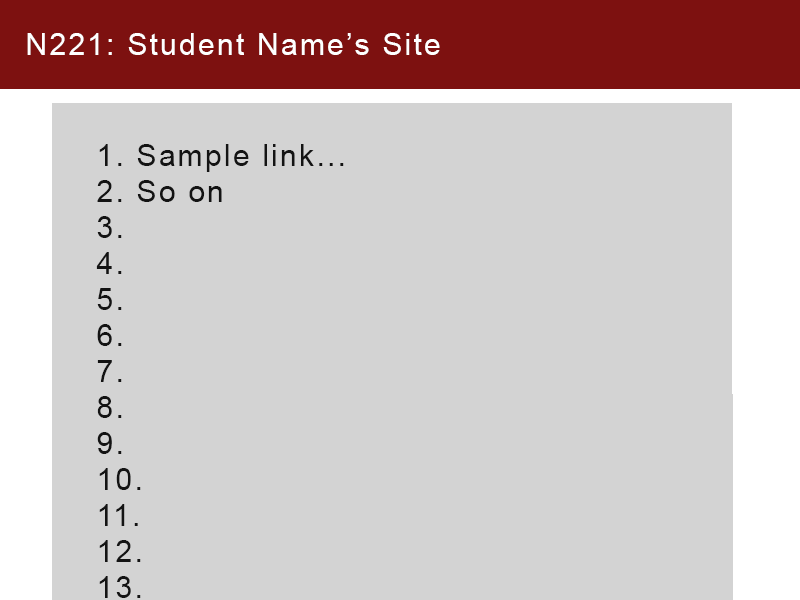
<style>
.page{position:relative;width:800px;height:600px;background:#d3d3d3}
.page>*{position:absolute;margin:0}
.t1{font:30px "ArialMT";letter-spacing:0.075em;color:#ffffff}
.t2{font:30px "ArialMT";letter-spacing:0.075em;color:#131313}
</style>
<div class="page">
<p class="t1" style="left:27px;top:33px;width:413px;height:22px">N221: Student Name’s Site</p>
<p class="t2" style="left:96px;top:144px;width:248px;height:454px">1. Sample link...<br>2. So on<br>3.<br>4.<br>5.<br>6.<br>7.<br>8.<br>9.<br>10.<br>11.<br>12.<br>13.</p>
</div>
